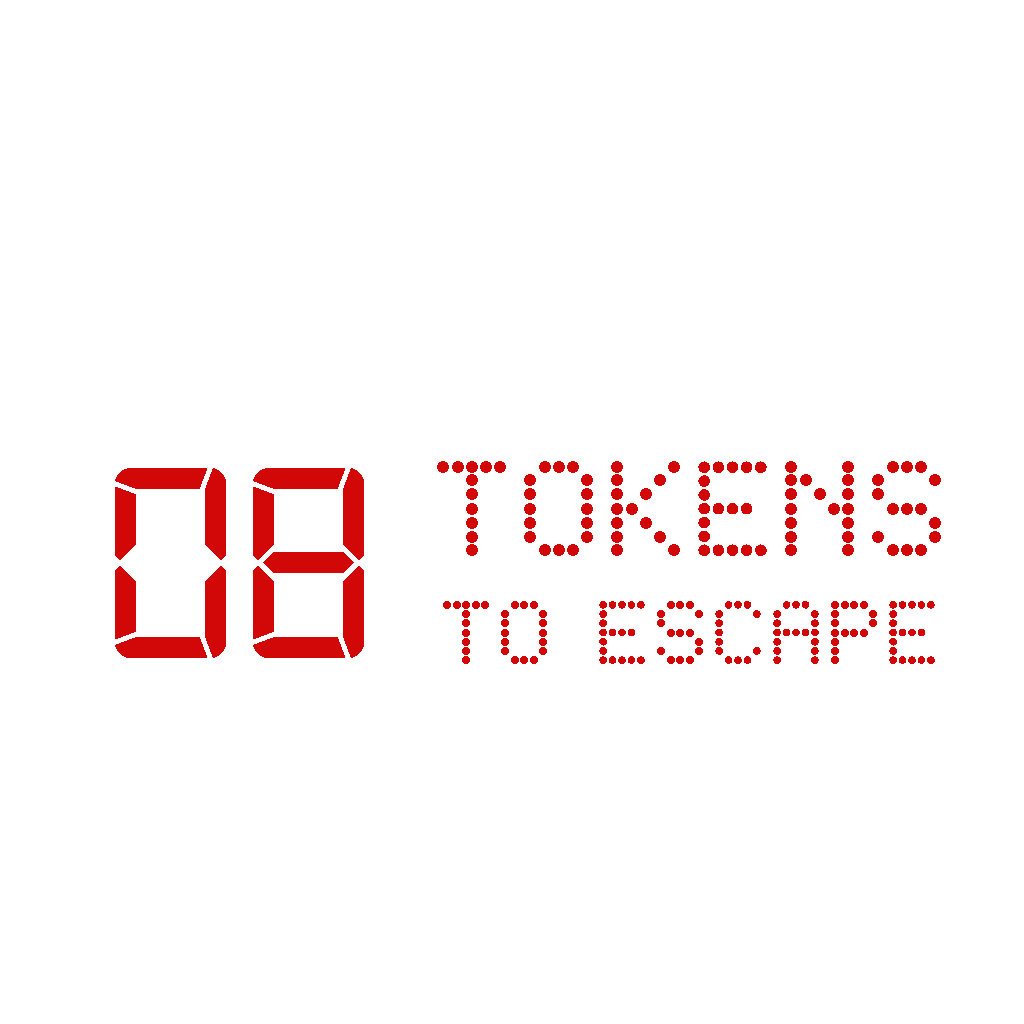
<style>
.page{position:relative;width:1024px;height:1024px;background:#ffffff}
.page>*{position:absolute;margin:0}
.t1{font:90px "LEDDotMatrixRegular";color:#d20808}
.t2{font:135px "LEDDotMatrixRegular";color:#d20808}
.t3{font:291px "Digital-7";color:#d20808}
</style>
<div class="page">
<p class="t1" style="left:437px;top:461px;width:504px;height:203px;text-align:center"><span class="t2">TOKENS<br></span>TO ESCAPE</p>
<p class="t3" style="left:115px;top:468px;width:249px;height:190px">08</p>
</div>
